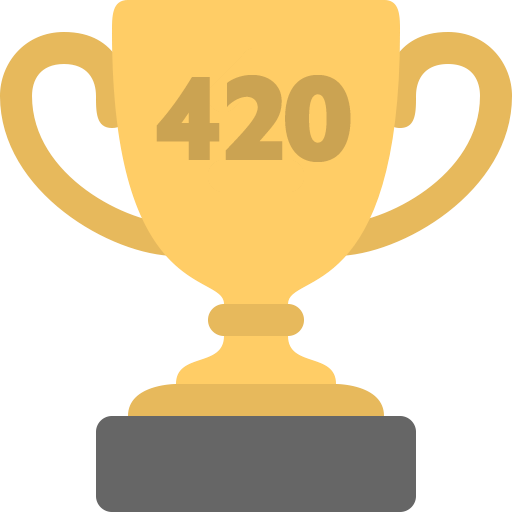
<style>
.page{position:relative;width:512px;height:512px;background:#ffffff}
.page>*{position:absolute;margin:0}
.t1{font:127px "Sen-ExtraBold";letter-spacing:-0.075em;color:#cca352}
</style>
<div class="page">
<p class="t1" style="left:156px;top:75px;width:195px;height:87px">420</p>
</div>
